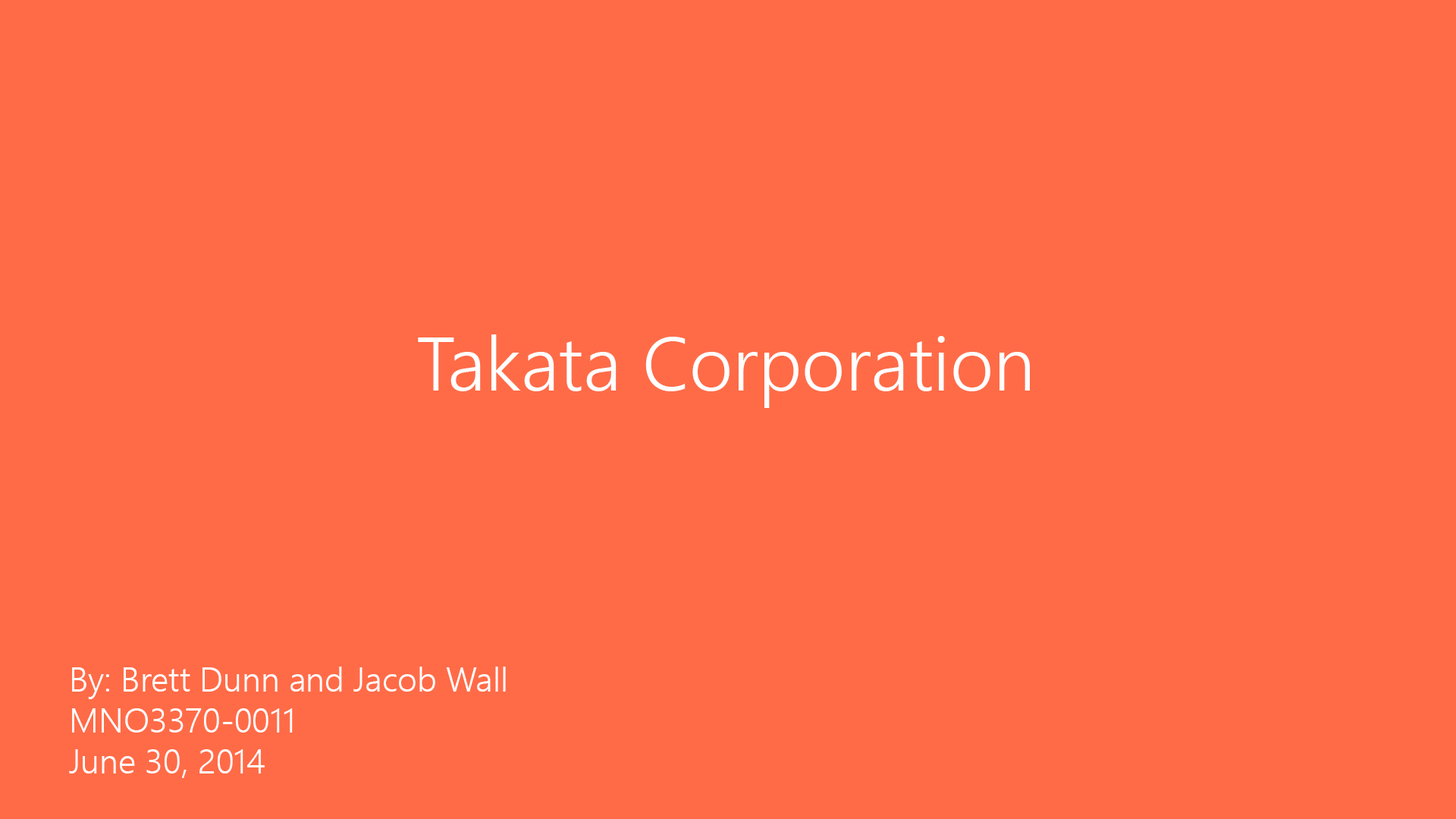
<style>
.page{position:relative;width:1456px;height:819px;background:#ff6b47}
.page>*{position:absolute;margin:0}
.t1{font:75.8px "SegoeUI-Semilight";color:#ffffff}
.t2{font:34.1px "SegoeUI-Semilight";color:#ffffff}
</style>
<div class="page">
<p class="t1" style="left:418px;top:334px;width:612px;height:74px">Takata Corporation</p>
<p class="t2" style="left:69px;top:667px;width:437px;height:111px">By: Brett Dunn and Jacob Wall<br>MNO3370-0011<br>June 30, 2014</p>
</div>
